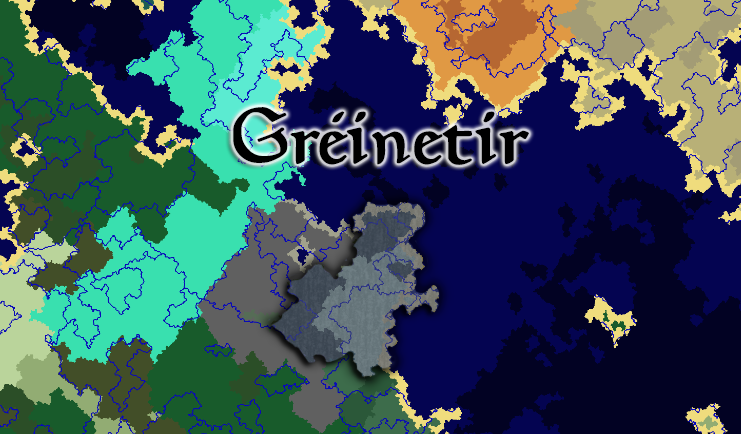
<style>
.page{position:relative;width:741px;height:434px;background:#040451}
.page>*{position:absolute;margin:0}
.t1{font:80px "GoudyMedieval-Alternate";color:#000000}
</style>
<div class="page">
<p class="t1" style="left:233px;top:107px;width:296px;height:58px">Gréinetir</p>
</div>
